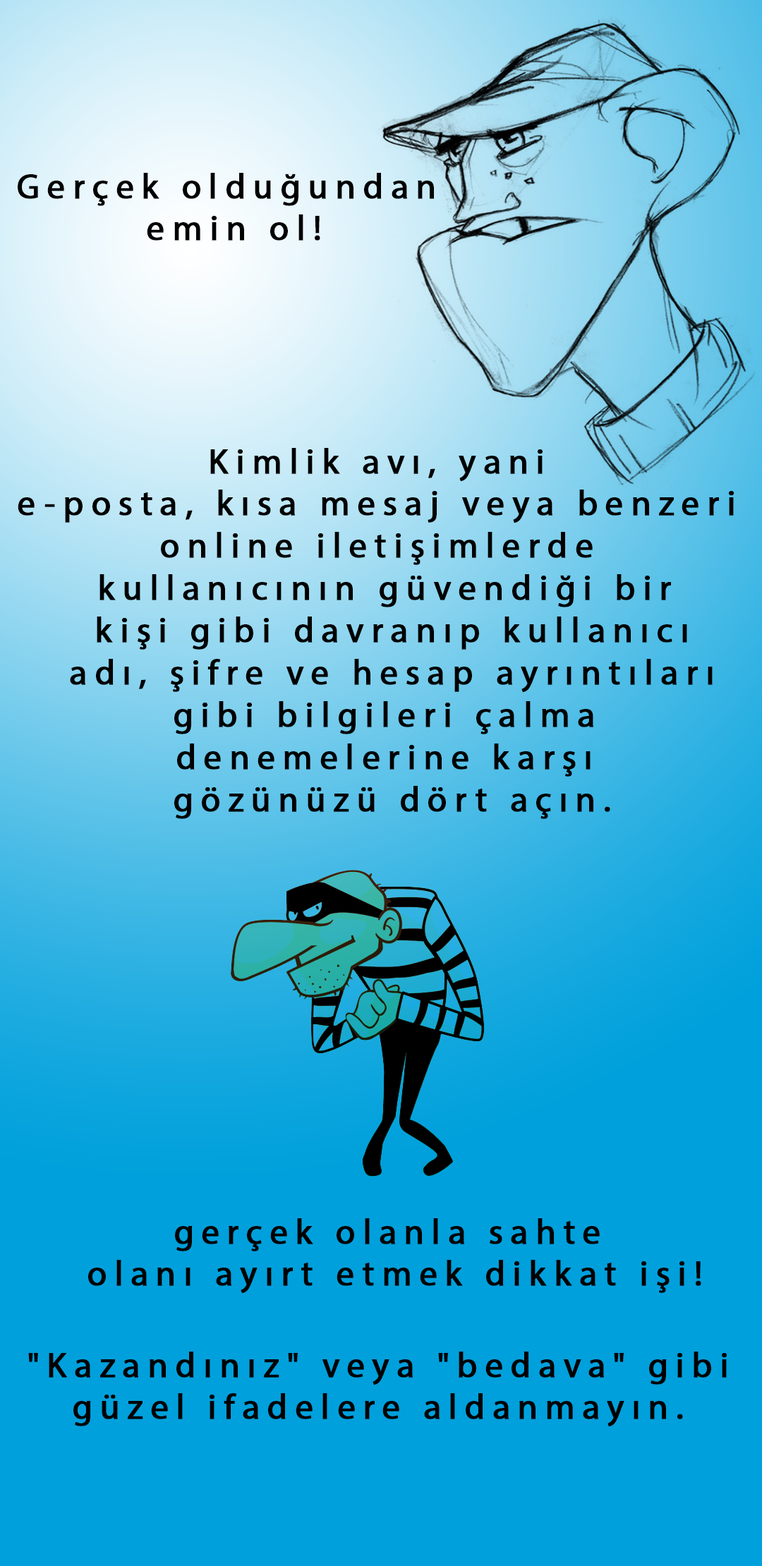
<style>
.page{position:relative;width:762px;height:1566px;background:#00a0dc}
.page>*{position:absolute;margin:0}
.t1{font:35.3px "MyriadPro-Regular";letter-spacing:0.2em;color:#000000;font-weight:bold}
</style>
<div class="page">
<p class="t1" style="left:18px;top:173px;width:416px;height:67px;text-align:center">Gerçek olduğundan <br>emin ol!</p>
<p class="t1" style="left:18px;top:448px;width:715px;height:371px;text-align:center">Kimlik avı, yani <br>e-posta, kısa mesaj veya benzeri <br>online iletişimlerde <br>kullanıcının güvendiği bir<br> kişi gibi davranıp kullanıcı<br> adı, şifre ve hesap ayrıntıları<br> gibi bilgileri çalma <br>denemelerine karşı<br> gözünüzü dört açın.</p>
<p class="t1" style="left:88px;top:1218px;width:613px;height:75px;text-align:center">gerçek olanla sahte <br>olanı ayırt etmek dikkat işi!</p>
<p class="t1" style="left:28px;top:1351px;width:698px;height:75px;text-align:center">"Kazandınız" veya "bedava" gibi<br>güzel ifadelere aldanmayın.</p>
</div>
